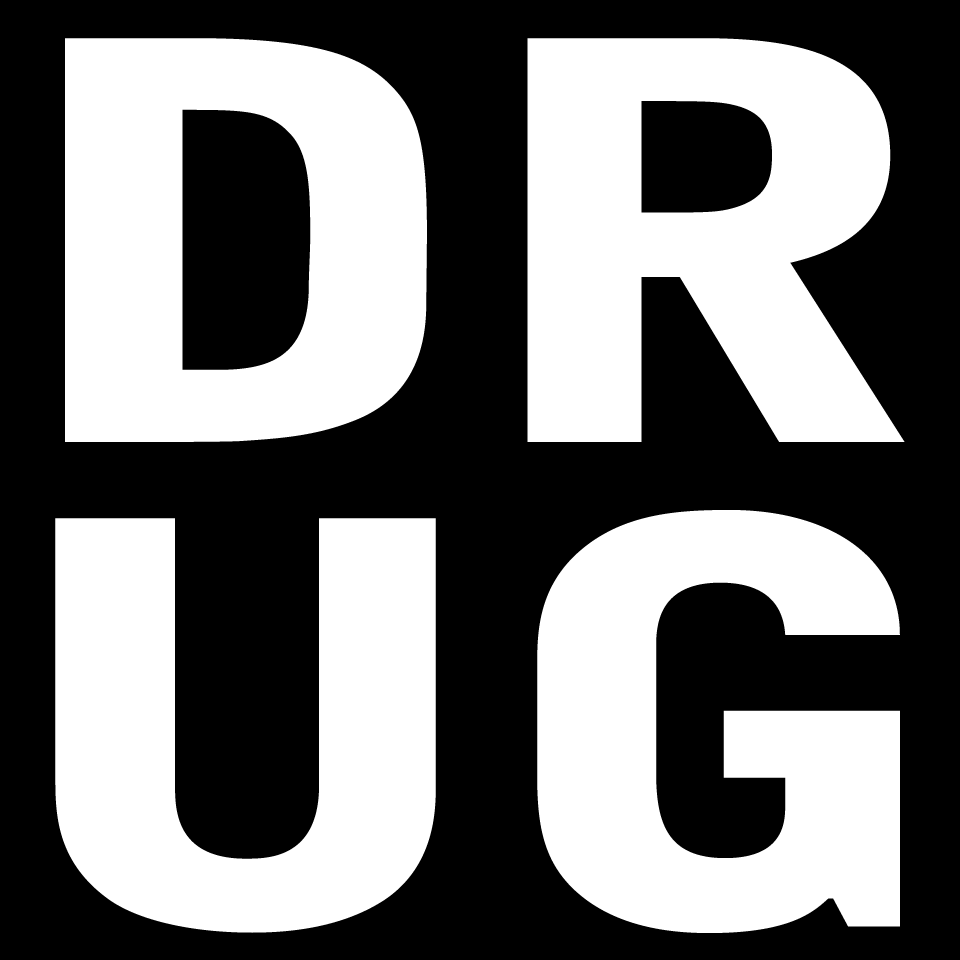
<style>
.page{position:relative;width:960px;height:960px;background:#000000}
.page>*{position:absolute;margin:0}
.t1{font:550px/480px "BellGothicStd-Black";letter-spacing:-0.025em;color:#ffffff;scale:1.3 1}
</style>
<div class="page">
<p class="t1" style="left:55px;top:38px;width:850px;height:895px;text-align:center">DR<br>UG</p>
</div>
